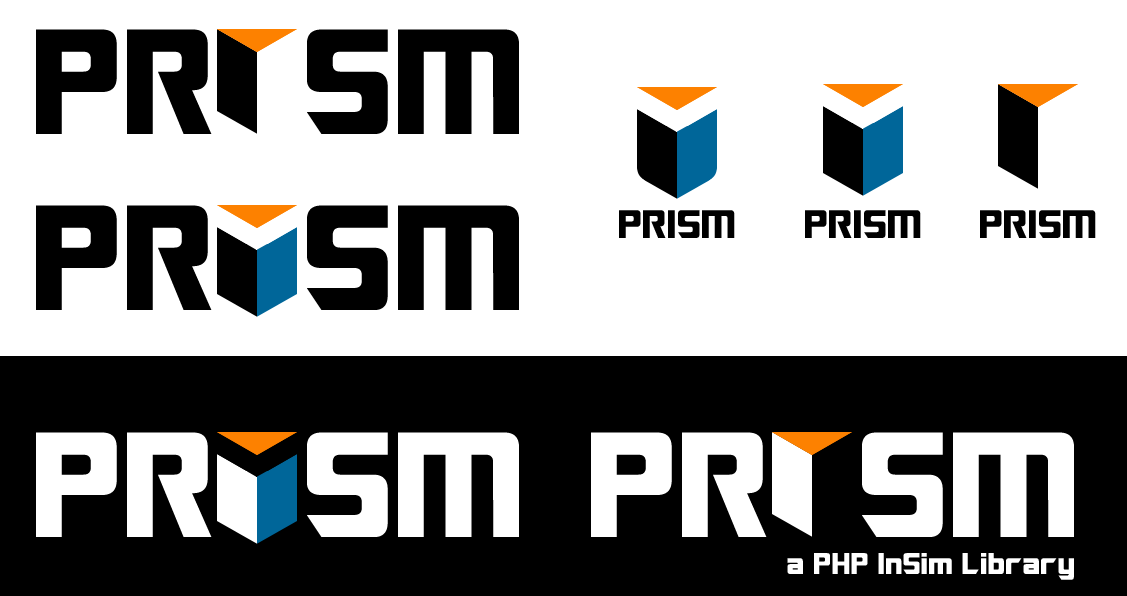
<style>
.page{position:relative;width:1127px;height:596px;background:#ffffff}
.page>*{position:absolute;margin:0}
.t1{font:150px "Optimus";color:#000000}
.t2{font:40px "Optimus";color:#000000}
.t3{font:150px "Optimus";color:#ffffff}
.t4{font:30px "Optimus";color:#ffffff}
</style>
<div class="page">
<p class="t1" style="left:36px;top:29px;width:483px;height:105px">PR  SM</p>
<p class="t1" style="left:36px;top:205px;width:483px;height:105px">PR  SM</p>
<p class="t2" style="left:619px;top:210px;width:116px;height:28px">PRISM</p>
<p class="t2" style="left:805px;top:210px;width:116px;height:28px">PRISM</p>
<p class="t2" style="left:980px;top:210px;width:116px;height:28px">PRISM</p>
<p class="t3" style="left:36px;top:432px;width:483px;height:105px">PR  SM</p>
<p class="t3" style="left:591px;top:432px;width:483px;height:105px">PR  SM</p>
<p class="t4" style="left:787px;top:553px;width:287px;height:27px">a PHP InSim Library</p>
</div>
